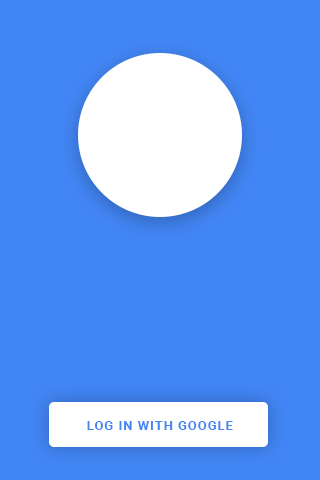
<style>
.page{position:relative;width:320px;height:480px;background:#4285f4}
.page>*{position:absolute;margin:0}
.t1{font:12.5px "Roboto-Bold";letter-spacing:0.1em;color:#4285f4}
</style>
<div class="page">
<p class="t1" style="left:87px;top:421px;width:146px;height:9px">LOG IN WITH GOOGLE</p>
</div>
